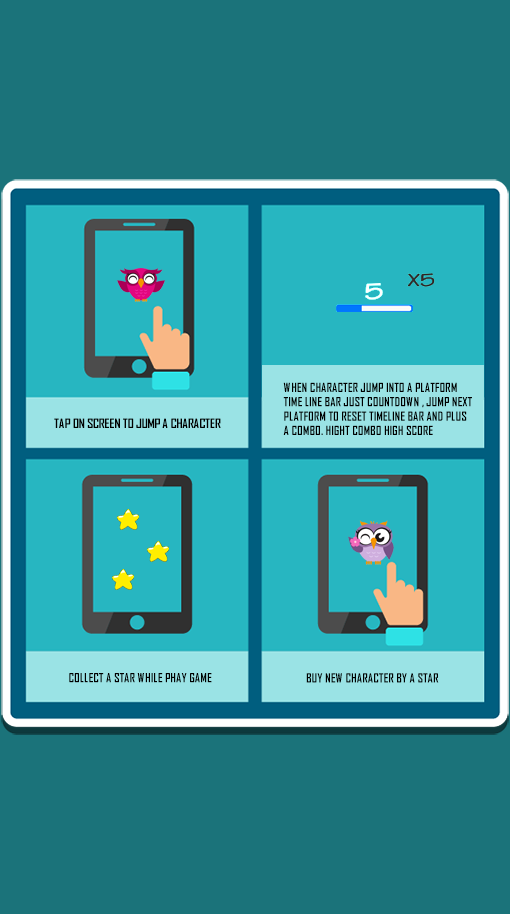
<style>
.page{position:relative;width:510px;height:914px;background:#1b737a}
.page>*{position:absolute;margin:0}
.t1{font:12px "AgencyFB-Bold";color:#000000}
</style>
<div class="page">
<p class="t1" style="left:283px;top:382px;width:189px;height:53px">WHEN CHARACTER JUMP INTO A PLATFORM<br>TIME LINE BAR JUST COUNTDOWN , JUMP NEXT<br>PLATFORM TO RESET TIMELINE BAR AND PLUS <br>A COMBO. HIGHT COMBO HIGH SCORE</p>
<p class="t1" style="left:69px;top:673px;width:143px;height:10px">COLLECT A STAR WHILE PHAY GAME</p>
<p class="t1" style="left:306px;top:673px;width:133px;height:10px">BUY NEW CHARACTER BY A STAR</p>
</div>
